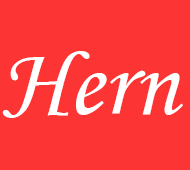
<style>
.page{position:relative;width:190px;height:170px;background:#fc3434}
.page>*{position:absolute;margin:0}
.t1{font:100px "STLiti";color:#ffffff}
</style>
<div class="page">
<p class="t1" style="left:2px;top:51px;width:181px;height:67px">Hern</p>
</div>
